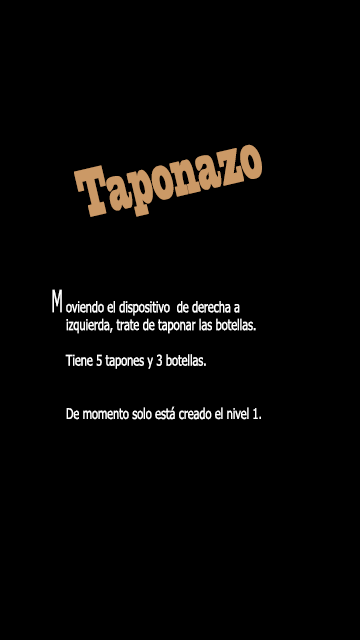
<style>
.page{position:relative;width:360px;height:640px;background:#000000}
.page>*{position:absolute;margin:0}
.t1{font:63.4px "BlackoakStd";color:#cc9966;scale:0.25 1}
.t2{font:30.4px "Tahoma";color:#ffffff;scale:0.48 1}
.t3{font:14.8px "Tahoma";color:#ffffff;scale:0.74 1}
</style>
<div class="page">
<p class="t1" style="left:74px;top:144px;width:188px;height:73px;rotate:-13deg">Taponazo</p>
<p class="t2" style="left:52px;top:289px;width:10px;height:24px">M</p>
<p class="t3" style="left:65px;top:301px;width:196px;height:119px">oviendo el dispositivo  de derecha a <br>izquierda, trate de taponar las botellas.<br><br>Tiene 5 tapones y 3 botellas.<br><br><br>De momento solo está creado el nivel 1.</p>
</div>
